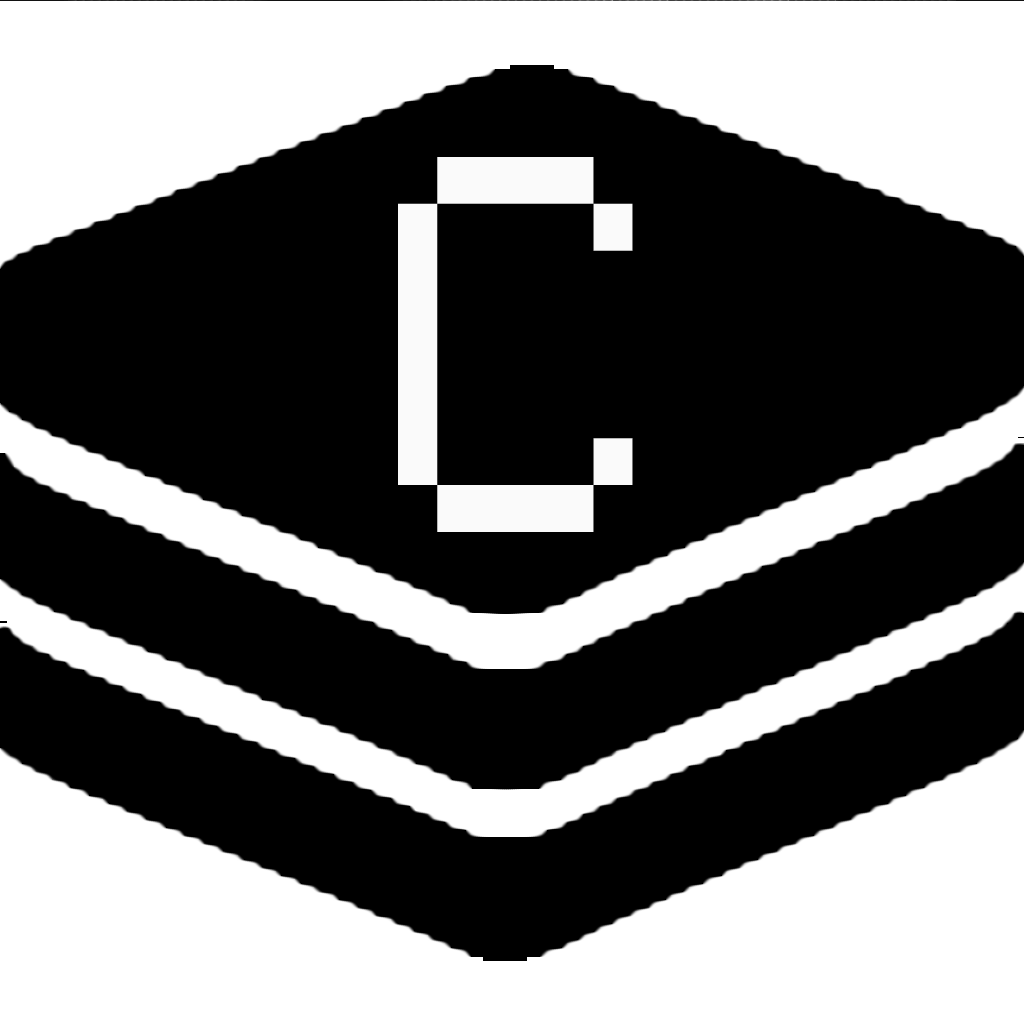
<style>
.page{position:relative;width:1024px;height:1024px;background:#000000}
.page>*{position:absolute;margin:0}
.t1{font:500px "Small Fonts";color:#fafafa}
</style>
<div class="page">
<p class="t1" style="left:398px;top:156px;width:235px;height:375px">C</p>
</div>
